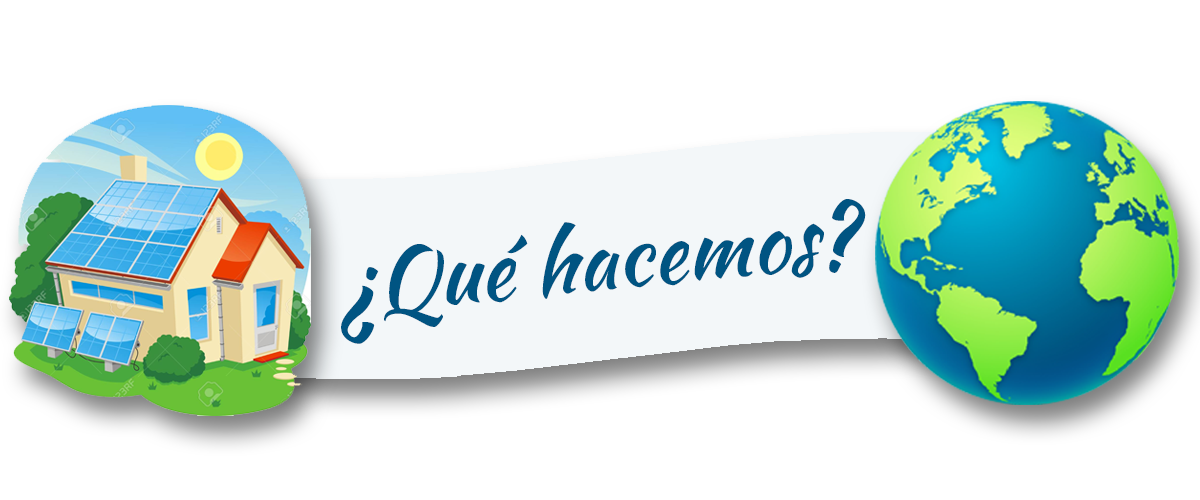
<style>
.page{position:relative;width:1200px;height:500px;background:#ffffff}
.page>*{position:absolute;margin:0}
.t1{font:85px "KaushanScript-Regular";color:#005482}
</style>
<div class="page">
<p class="t1" style="left:341px;top:199px;width:525px;height:145px;rotate:-6deg">¿Qué hacemos?</p>
</div>
